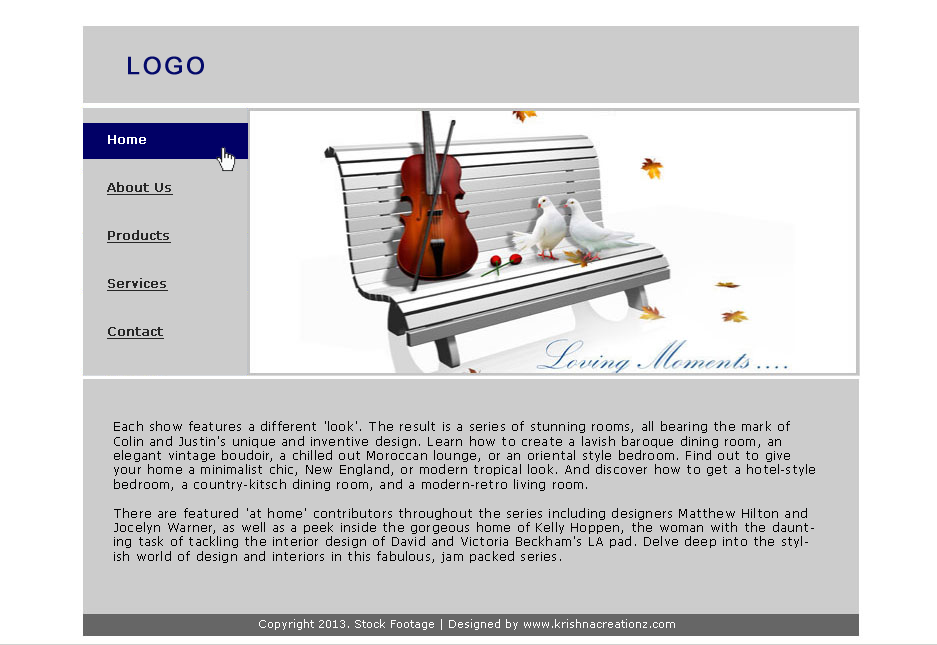
<style>
.page{position:relative;width:937px;height:645px;background:#cccccc}
.page>*{position:absolute;margin:0}
.t1{font:24px "ArialMT";letter-spacing:0.1em;color:#040a6a;text-transform:uppercase;font-weight:bold}
.t2{font:12px/48px "Verdana";color:#262626;font-weight:bold;text-decoration:underline}
.t3{font:12px/48px "Verdana";color:#ffffff;font-weight:bold}
.t4{font:12px "Tahoma";letter-spacing:0.1em;color:#010000}
.t5{font:11px "Verdana";color:#ffffff}
</style>
<div class="page">
<p class="t1" style="left:128px;top:56px;width:76px;height:19px">logo</p>
<p class="t2" style="left:107px;top:135px;width:66px;height:204px"><span class="t3">Home<br></span>About Us<br>Products<br>Services<br>Contact</p>
<p class="t4" style="left:114px;top:421px;width:701px;height:142px">Each show features a different 'look'. The result is a series of stunning rooms, all bearing the mark of Colin and Justin's unique and inventive design. Learn how to create a lavish baroque dining room, an elegant vintage boudoir, a chilled out Moroccan lounge, or an oriental style bedroom. Find out to give your home a minimalist chic, New England, or modern tropical look. And discover how to get a hotel-style bedroom, a country-kitsch dining room, and a modern-retro living room.<br><br>There are featured 'at home' contributors throughout the series including designers Matthew Hilton and Jocelyn Warner, as well as a peek inside the gorgeous home of Kelly Hoppen, the woman with the daunting task of tackling the interior design of David and Victoria Beckham's LA pad. Delve deep into the stylish world of design and interiors in this fabulous, jam packed series.</p>
<p class="t5" style="left:259px;top:619px;width:416px;height:11px">Copyright 2013. Stock Footage | Designed by www.krishnacreationz.com</p>
</div>
